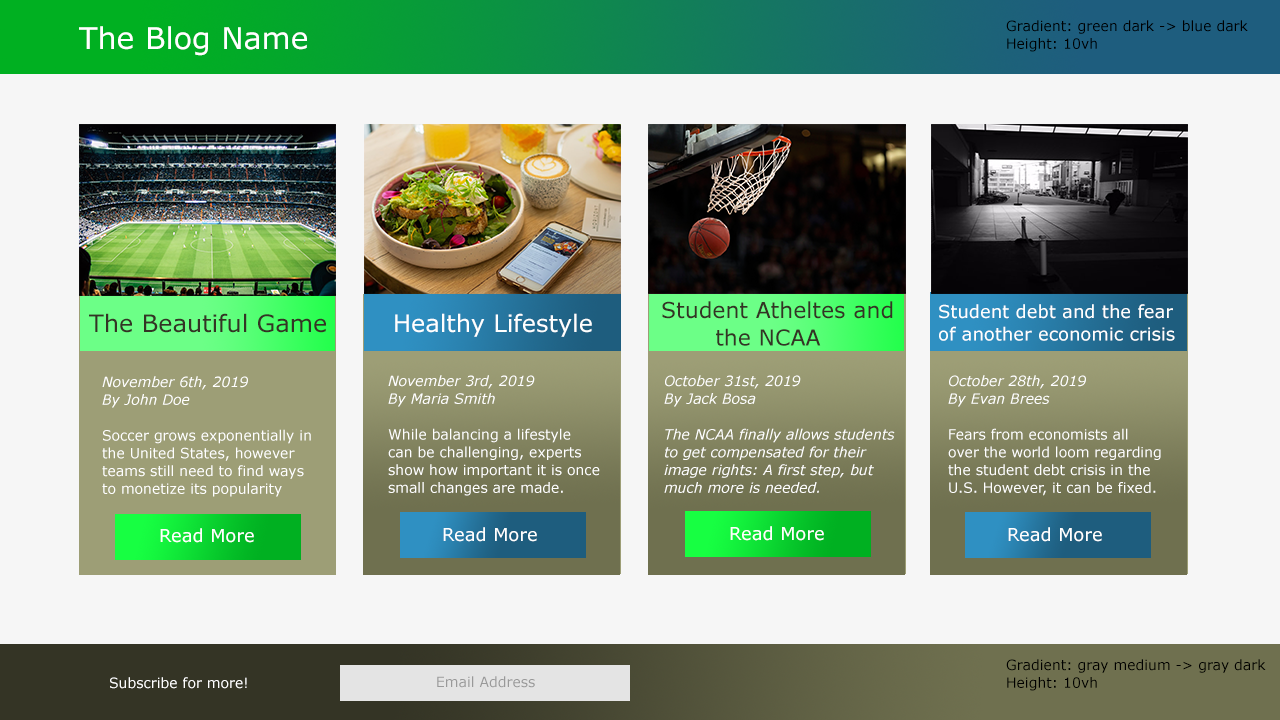
<style>
.page{position:relative;width:1280px;height:720px;background:#f6f6f6}
.page>*{position:absolute;margin:0}
.t1{font:30px "Verdana";color:#ffffff}
.t2{font:14px "Verdana";color:#000000}
.t3{font:22px "Verdana";color:#343425}
.t4{font:18px "Verdana";color:#ffffff}
.t5{font:24px "Verdana";color:#343425}
.t6{font:24px "Verdana";color:#ffffff}
.t7{font:14px "Verdana";color:#ffffff}
.t8{font:14px "Verdana-Italic";color:#ffffff}
.t9{font:14px "Verdana";color:#999999}
</style>
<div class="page">
<p class="t1" style="left:79px;top:26px;width:228px;height:30px">The Blog Name</p>
<p class="t2" style="left:1006px;top:20px;width:242px;height:32px;text-align:right">Gradient: green dark -&gt; blue dark<br>Height: 10vh</p>
<p class="t3" style="left:662px;top:301px;width:231px;height:45px;text-align:right">Student Atheltes and<br>       the NCAA</p>
<p class="t4" style="left:939px;top:304px;width:236px;height:37px;text-align:right">Student debt and the fear <br>of another economic crisis</p>
<p class="t5" style="left:89px;top:313px;width:237px;height:20px">The Beautiful Game</p>
<p class="t6" style="left:395px;top:313px;width:197px;height:24px">Healthy Lifestyle</p>
<p class="t7" style="left:102px;top:376px;width:209px;height:121px;text-align:right"><span class="t8">November 6th, 2019<br>By John Doe<br><br></span>Soccer grows exponentially in<br>the United States, however <br>teams still need to find ways<br>to monetize its popularity</p>
<p class="t7" style="left:388px;top:375px;width:212px;height:121px;text-align:right"><span class="t8">November 3rd, 2019<br>By Maria Smith<br><br></span>While balancing a lifestyle<br>can be challenging, experts<br>show how important it is once<br>small changes are made.</p>
<p class="t8" style="left:664px;top:375px;width:231px;height:118px;text-align:right">October 31st, 2019<br>By Jack Bosa<br><br>The NCAA finally allows students<br>to get compensated for their <br>image rights: A first step, but<br>much more is needed.</p>
<p class="t7" style="left:948px;top:375px;width:213px;height:121px;text-align:right"><span class="t8">October 28th, 2019<br>By Evan Brees<br><br></span>Fears from economists all<br>over the world loom regarding<br>the student debt crisis in the<br>U.S. However, it can be fixed.</p>
<p class="t4" style="left:160px;top:528px;width:94px;height:15px">Read More</p>
<p class="t4" style="left:443px;top:527px;width:94px;height:15px">Read More</p>
<p class="t4" style="left:730px;top:526px;width:94px;height:15px">Read More</p>
<p class="t4" style="left:1008px;top:527px;width:94px;height:15px">Read More</p>
<p class="t2" style="left:1006px;top:659px;width:260px;height:32px;text-align:right">Gradient: gray medium -&gt; gray dark<br>Height: 10vh</p>
<p class="t7" style="left:110px;top:677px;width:137px;height:12px">Subscribe for more!</p>
<p class="t9" style="left:437px;top:676px;width:98px;height:12px">Email Address</p>
</div>
